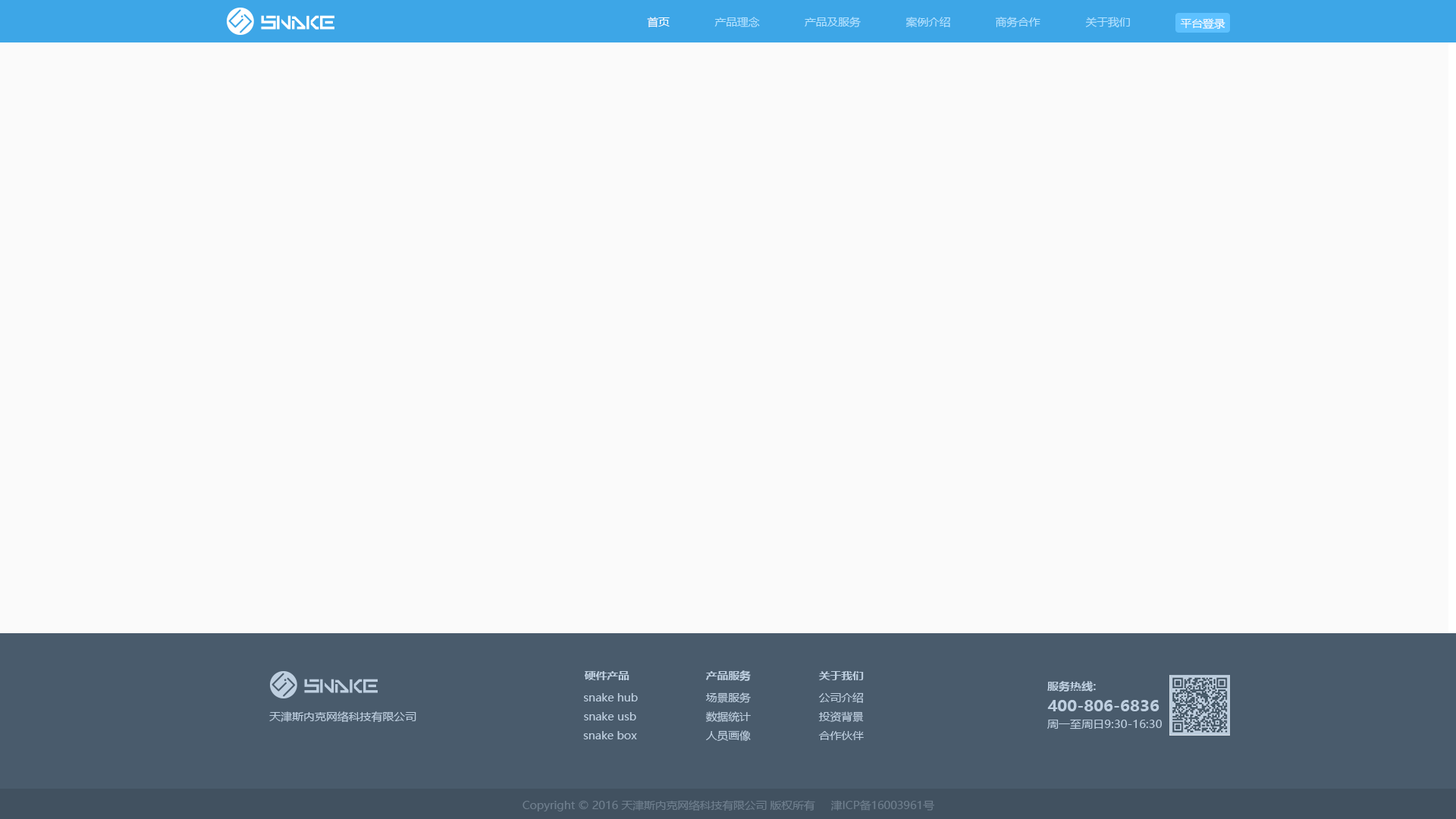
<style>
.page{position:relative;width:1456px;height:819px;background:#fafafa}
.page>*{position:absolute;margin:0}
.t1{font:10.6px "MicrosoftYaHei";letter-spacing:-0.01em;color:#ffffff;scale:1.06 1}
.t2{font:10.6px "MicrosoftYaHei";letter-spacing:-0.01em;color:#b2e2ff;scale:1.06 1}
.t3{font:10.6px "MicrosoftYaHei-Bold";letter-spacing:-0.01em;color:#becfe0;scale:1.06 1}
.t4{font:10.6px "MicrosoftYaHei-Bold";letter-spacing:0.01em;color:#becfe0;scale:1.06 1}
.t5{font:10.6px "MicrosoftYaHei";letter-spacing:-0.01em;color:#becfe0;scale:1.06 1}
.t6{font:15.2px "MicrosoftYaHei-Bold";letter-spacing:-0.01em;color:#becfe0;scale:1.06 1}
.t7{font:10.6px "MicrosoftYaHei";color:#becfe0;scale:1.06 1}
.t8{font:10.6px "MicrosoftYaHei";letter-spacing:0.01em;color:#becfe0;scale:1.06 1}
.t9{font:10.6px "MicrosoftYaHei";letter-spacing:-0.01em;color:#6f7f8e;scale:1.06 1}
</style>
<div class="page">
<p class="t1" style="left:647px;top:17px;width:23px;height:10px">首页</p>
<p class="t2" style="left:714px;top:17px;width:46px;height:10px">产品理念</p>
<p class="t2" style="left:805px;top:17px;width:56px;height:10px">产品及服务</p>
<p class="t2" style="left:905px;top:17px;width:45px;height:10px">案例介绍</p>
<p class="t2" style="left:996px;top:17px;width:44px;height:10px">商务合作</p>
<p class="t2" style="left:1085px;top:17px;width:45px;height:11px">关于我们</p>
<p class="t1" style="left:1180px;top:18px;width:45px;height:11px">平台登录</p>
<p class="t3" style="left:584px;top:671px;width:45px;height:9px">硬件产品</p>
<p class="t3" style="left:706px;top:670px;width:45px;height:11px">产品服务</p>
<p class="t3" style="left:819px;top:671px;width:45px;height:9px">关于我们</p>
<p class="t4" style="left:1047px;top:681px;width:49px;height:11px">服务热线:</p>
<p class="t5" style="left:584px;top:693px;width:54px;height:8px">snake hub</p>
<p class="t5" style="left:706px;top:692px;width:45px;height:11px">场景服务</p>
<p class="t5" style="left:819px;top:692px;width:45px;height:11px">公司介绍</p>
<p class="t6" style="left:1047px;top:700px;width:112px;height:11px">400-806-6836</p>
<p class="t7" style="left:269px;top:711px;width:147px;height:12px">天津斯内克网络科技有限公司</p>
<p class="t5" style="left:584px;top:712px;width:52px;height:8px">snake usb</p>
<p class="t5" style="left:706px;top:711px;width:45px;height:11px">数据统计</p>
<p class="t5" style="left:819px;top:711px;width:45px;height:11px">投资背景</p>
<p class="t8" style="left:1047px;top:719px;width:115px;height:11px">周一至周日9:30-16:30</p>
<p class="t5" style="left:583px;top:731px;width:54px;height:8px">snake box</p>
<p class="t5" style="left:706px;top:730px;width:45px;height:11px">人员画像</p>
<p class="t5" style="left:818px;top:731px;width:46px;height:9px">合作伙伴</p>
<p class="t9" style="left:522px;top:800px;width:412px;height:11px">Copyright © 2016 天津斯内克网络科技有限公司 版权所有     津ICP备16003961号</p>
</div>
